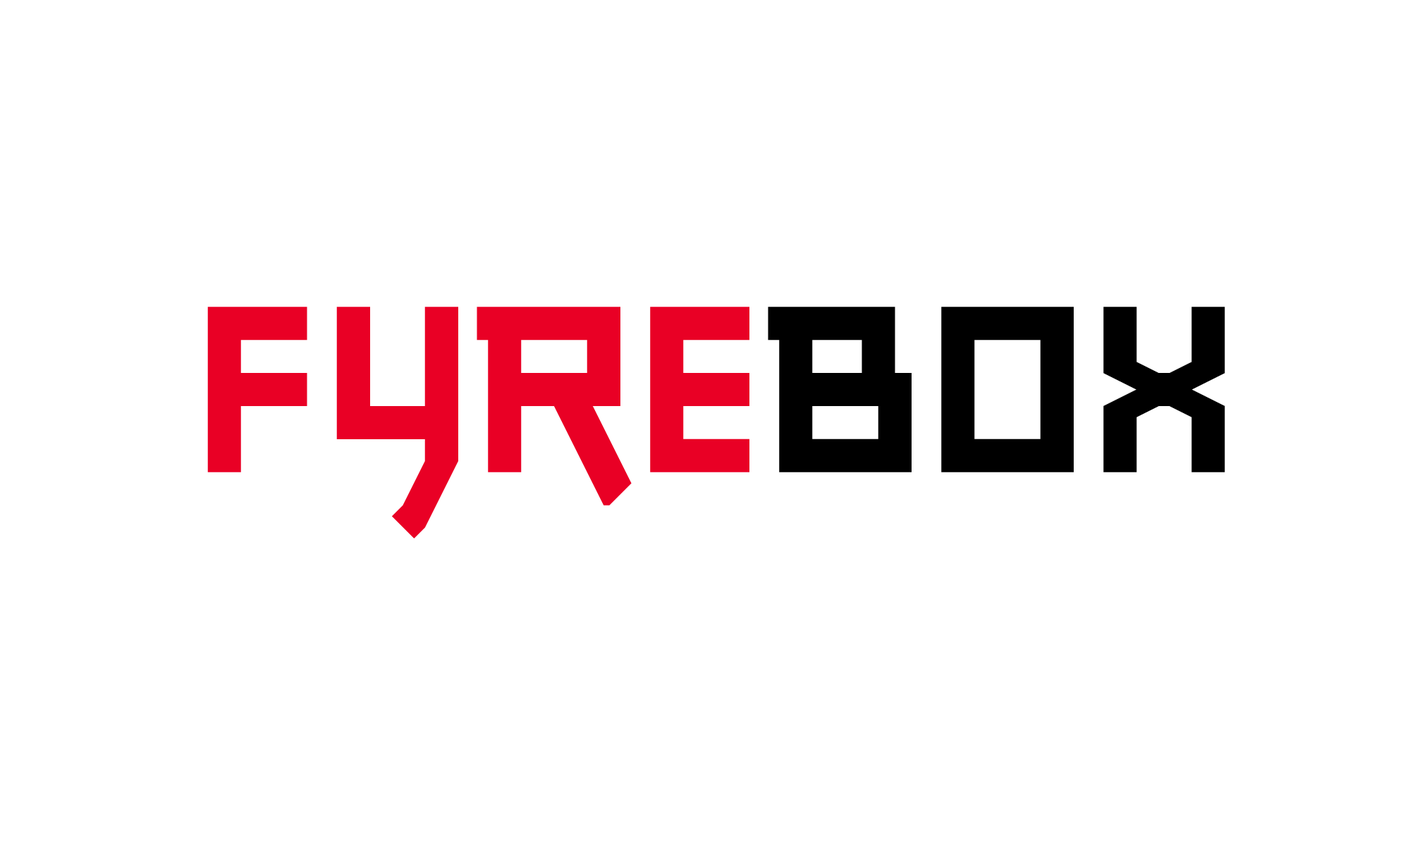
<style>
.page{position:relative;width:1410px;height:846px;background:#ffffff}
.page>*{position:absolute;margin:0}
.t1{font:352.4px "journey";color:#e90025}
.t2{font:352.4px "journey";color:#000000}
</style>
<div class="page">
<p class="t1" style="left:207px;top:307px;width:1018px;height:232px">Fyre<span class="t2">box</span></p>
</div>
